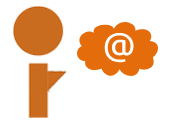
<style>
.page{position:relative;width:175px;height:125px;background:#ffffff}
.page>*{position:absolute;margin:0}
.t1{font:33.9px "Ubuntu";color:#ffffff;scale:1.03 1}
</style>
<div class="page">
<p class="t1" style="left:104px;top:33px;width:30px;height:30px">@</p>
</div>
